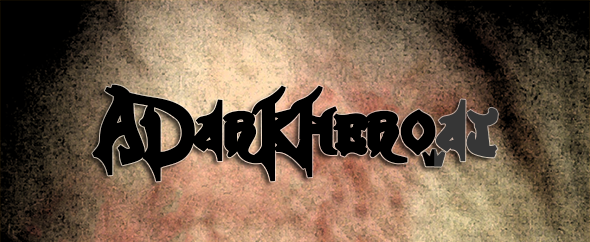
<style>
.page{position:relative;width:590px;height:242px}
.page>*{position:absolute;margin:0}
.t1{font:136px "KingdomHearts";letter-spacing:-0.05em;color:#000000;font-weight:bold}
.t2{font:136px "KingdomHearts";letter-spacing:-0.05em;color:#363636;font-weight:bold}
</style>
<div class="page">
<p class="t1" style="left:92px;top:84px;width:406px;height:98px">ADarkHero<span class="t2">at</span></p>
</div>
